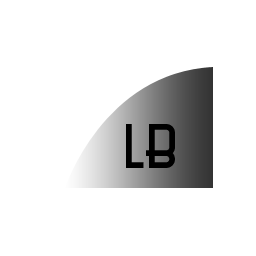
<style>
.page{position:relative;width:256px;height:256px;background:#ffffff}
.page>*{position:absolute;margin:0}
.t1{font:58.4px "ScienceFair";color:#000000}
</style>
<div class="page">
<p class="t1" style="left:126px;top:124px;width:49px;height:44px">LB</p>
</div>
